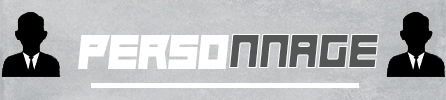
<style>
.page{position:relative;width:446px;height:100px}
.page>*{position:absolute;margin:0}
.t1{font:50px "Hindsight2020";color:#ffffff;scale:0.94 1}
.t2{font:50px "Hindsight2020";color:#535654;scale:0.94 1}
</style>
<div class="page">
<p class="t1" style="left:78px;top:35px;width:151px;height:34px">perso</p>
<p class="t2" style="left:229px;top:34px;width:150px;height:34px">nnage</p>
</div>
